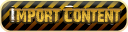
<style>
.page{position:relative;width:128px;height:32px}
.page>*{position:absolute;margin:0}
.t1{font:18.9px "28DaysLater";color:#fefefe;scale:0.91 1}
.t2{font:18.9px "28DaysLater";color:#e9ba3a;scale:0.91 1}
</style>
<div class="page">
<p class="t1" style="left:11px;top:8px;width:4px;height:14px">I</p>
<p class="t2" style="left:16px;top:7px;width:105px;height:16px">mport Content</p>
</div>
